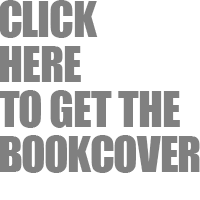
<style>
.page{position:relative;width:200px;height:200px;background:#ffffff}
.page>*{position:absolute;margin:0}
.t1{font:45.5px/45px "Impact";color:#808080}
</style>
<div class="page">
<p class="t1" style="left:0px;top:0px;width:200px;height:173px">CLICK<br>HERE<br>TO GET THE<br>BOOKCOVER</p>
</div>
